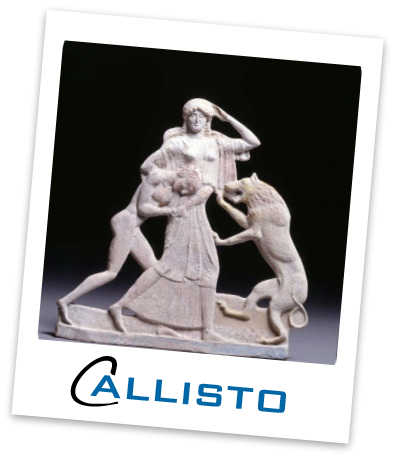
<style>
.page{position:relative;width:395px;height:457px;background:#ffffff}
.page>*{position:absolute;margin:0}
.t1{font:78px "Handwriting-Dakota";color:#000000}
.t2{font:50px "BankGothic-Light";color:#0066a6;font-weight:bold}
</style>
<div class="page">
<p class="t1" style="left:70px;top:356px;width:49px;height:51px;rotate:5deg">C</p>
<p class="t2" style="left:90px;top:375px;width:196px;height:38px;rotate:5deg">allisto</p>
</div>
